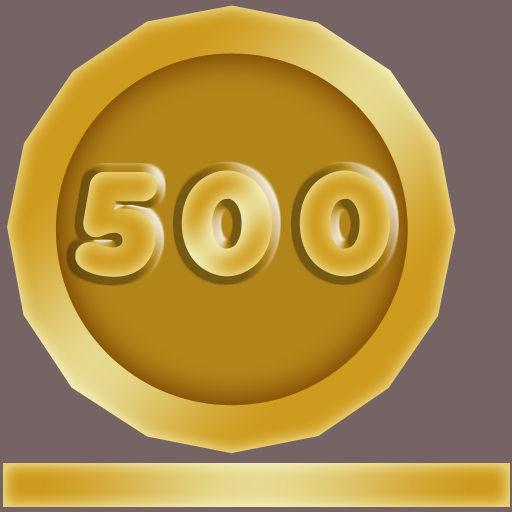
<style>
.page{position:relative;width:512px;height:512px;background:#766464}
.page>*{position:absolute;margin:0}
.t1{font:141.6px "Anja-Eliane-Nornal";letter-spacing:0.16em}
.t2{font:141.6px "Anja-Eliane-Nornal";letter-spacing:0.1em}
</style>
<div class="page">
<p class="t1" style="left:75px;top:170px;width:315px;height:107px"><span class="t2">5</span>00</p>
</div>
